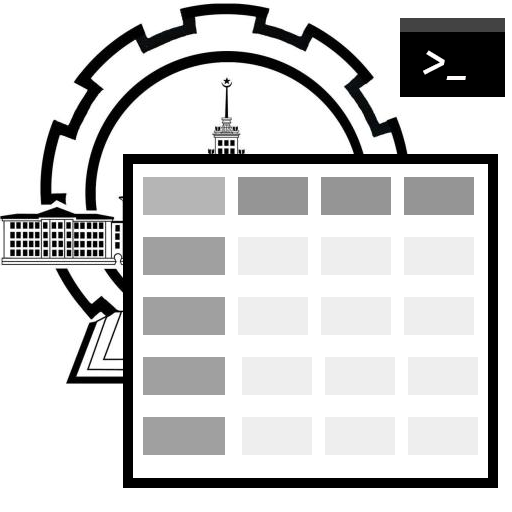
<style>
.page{position:relative;width:512px;height:512px;background:#ffffff}
.page>*{position:absolute;margin:0}
.t1{font:48px "Sarasa-Term-TC-Medium-Italic";color:#fdfbfb}
</style>
<div class="page">
<p class="t1" style="left:423px;top:50px;width:43px;height:30px">&gt;_</p>
</div>
